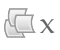
<style>
.page{position:relative;width:60px;height:50px;background:#ffffff}
.page>*{position:absolute;margin:0}
.t1{font:30px "BookAntiqua";color:#666666}
</style>
<div class="page">
<p class="t1" style="left:40px;top:19px;width:15px;height:15px">x</p>
</div>
